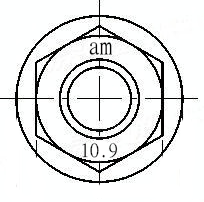
<style>
.page{position:relative;width:204px;height:202px;background:#feffff}
.page>*{position:absolute;margin:0}
.t1{font:24px "MingLiU";color:#000000}
.t2{font:18.7px "MingLiU";color:#000000}
</style>
<div class="page">
<p class="t1" style="left:89px;top:42px;width:24px;height:13px">am</p>
<p class="t2" style="left:82px;top:143px;width:36px;height:15px">10.9</p>
</div>
